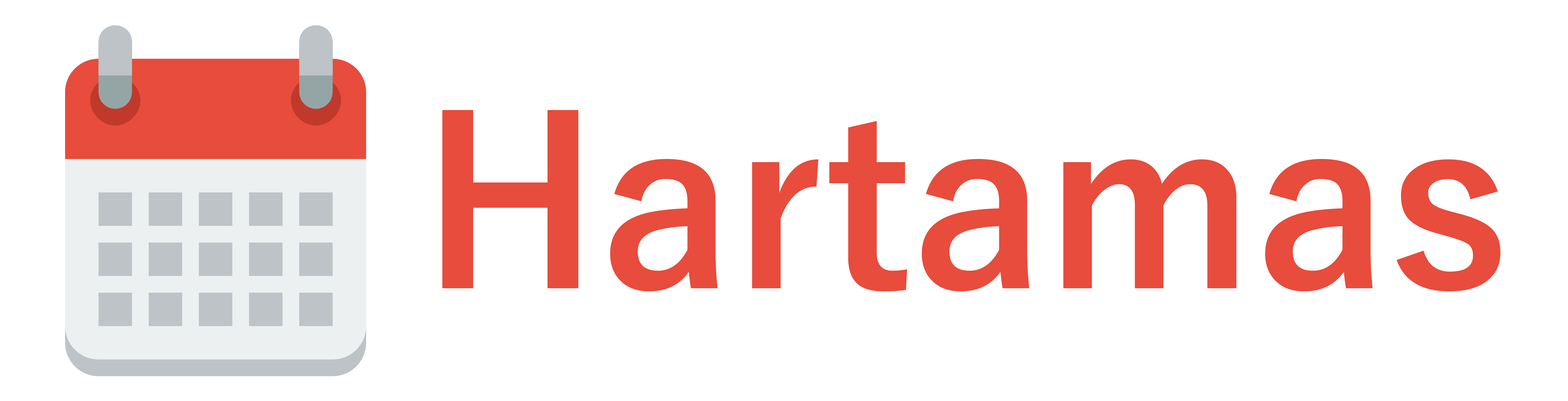
<style>
.page{position:relative;width:1568px;height:401px;background:#ffffff}
.page>*{position:absolute;margin:0}
.t1{font:230px "YuGothic-Bold";color:#e74c3c}
</style>
<div class="page">
<p class="t1" style="left:442px;top:110px;width:1059px;height:182px">Hartamas</p>
</div>
